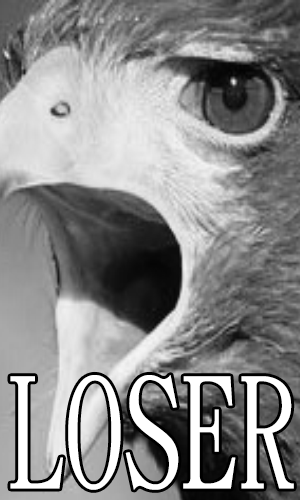
<style>
.page{position:relative;width:300px;height:500px}
.page>*{position:absolute;margin:0}
.t1{font:152px "DFKaiShu-SB-Estd-BF";color:#ffffff;scale:0.76 1}
</style>
<div class="page">
<p class="t1" style="left:10px;top:375px;width:284px;height:115px">LOSER</p>
</div>
